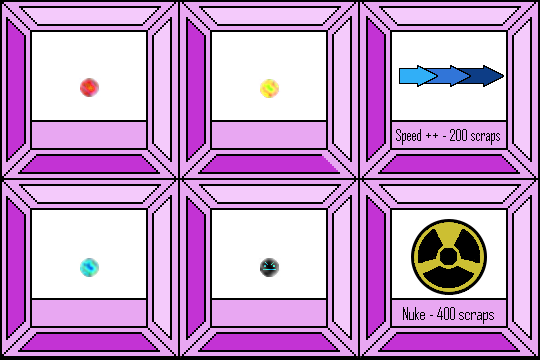
<style>
.page{position:relative;width:540px;height:360px;background:#ffffff}
.page>*{position:absolute;margin:0}
.t1{font:16.2px "AgencyFB-Reg";color:#000000}
</style>
<div class="page">
<p class="t1" style="left:396px;top:129px;width:104px;height:16px">Speed ++ - 200 scraps</p>
</div>
